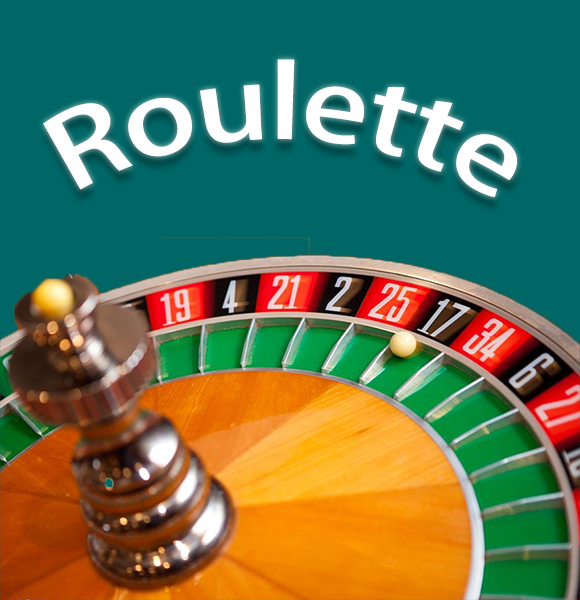
<style>
.page{position:relative;width:580px;height:600px;background:#006666}
.page>*{position:absolute;margin:0}
.t1{font:98.9px "AdobeHeitiStd-Regular";color:#ffffff}
</style>
<div class="page">
<p class="t1" style="left:43px;top:59px;width:474px;height:139px">Roulette</p>
</div>
